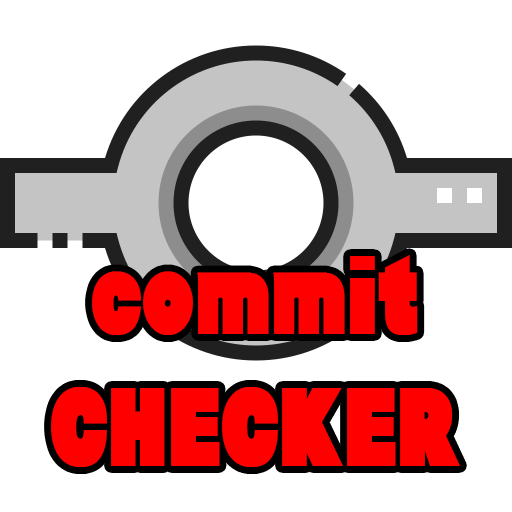
<style>
.page{position:relative;width:512px;height:512px;background:#ffffff}
.page>*{position:absolute;margin:0}
.t1{font:109.9px "Baltar-Regular";color:#ff0000;scale:0.85 1}
</style>
<div class="page">
<p class="t1" style="left:51px;top:255px;width:409px;height:212px;text-align:center">commit<br>CHECKER</p>
</div>
